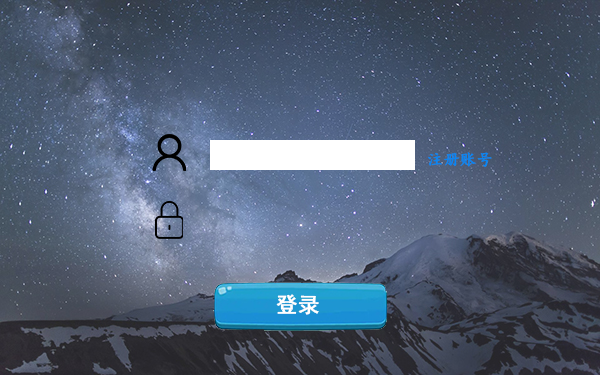
<style>
.page{position:relative;width:600px;height:375px}
.page>*{position:absolute;margin:0}
.t1{font:16px "KaiTi";color:#0787f4;font-weight:bold}
.t2{font:21.3px "SimHei";color:#ffffff;font-weight:bold}
</style>
<div class="page">
<p class="t1" style="left:428px;top:152px;width:64px;height:15px">注册账号</p>
<p class="t2" style="left:276px;top:294px;width:43px;height:21px">登录</p>
</div>
